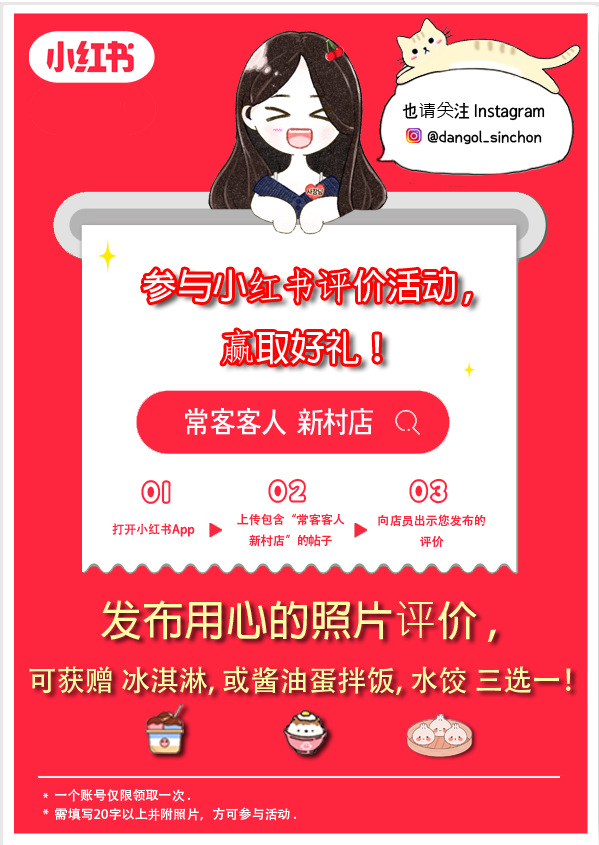
<style>
.page{position:relative;width:599px;height:845px;background:#fe253f}
.page>*{position:absolute;margin:0}
.t1{font:18px "Pix_SeoulNamsanCB";color:#000000}
.t2{font:18px "MicrosoftJhengHeiUIRegular";color:#000000}
.t3{font:16px "THEMiss";color:#000000}
.t4{font:30px "Pix_SeoulNamsanCB";color:#ffffff}
.t5{font:30px "KoreanPODGO-R";color:#fe253f}
.t6{font:12px "AdobeHeitiStd-Regular";color:#fe253f}
.t7{font:42px "AdobeFanHeitiStd-Bold";color:#fffea6}
.t8{font:42px "MicrosoftJhengHeiUIRegular";color:#fffea6}
.t9{font:29px "AdobeHeitiStd-Regular";color:#fffea6}
.t10{font:13px "AdobeHeitiStd-Regular";color:#ffffff}
.t11{font:13px "NanumBarunGothic";color:#ffffff}
</style>
<div class="page">
<p class="t1" style="left:402px;top:102px;width:143px;height:19px">也<span class="t2">请关</span>注 Instagram</p>
<p class="t3" style="left:427px;top:130px;width:115px;height:15px">@dangol_sinchon</p>
<p class="t4" style="left:185px;top:407px;width:188px;height:28px">常客客人 新村店</p>
<p class="t5" style="left:141px;top:480px;width:30px;height:24px">01</p>
<p class="t5" style="left:268px;top:478px;width:39px;height:25px">02</p>
<p class="t5" style="left:409px;top:478px;width:39px;height:26px">03</p>
<p class="t6" style="left:237px;top:513px;width:108px;height:34px;text-align:center">上传包含“常客客人 <br>新村店”的帖子</p>
<p class="t6" style="left:378px;top:514px;width:108px;height:33px;text-align:center">向店员出示您发布的<br>评价</p>
<p class="t6" style="left:112px;top:523px;width:83px;height:14px">打开小红书App</p>
<p class="t7" style="left:101px;top:600px;width:395px;height:42px">发布用心的照片<span class="t8">评</span>价 ,</p>
<p class="t9" style="left:29px;top:666px;width:542px;height:29px">可获赠 冰淇淋, 或酱油蛋拌饭, 水饺 三选一！</p>
<p class="t10" style="left:43px;top:789px;width:147px;height:13px"><span class="t11">*  </span>一个账号仅限领取一次 .</p>
<p class="t10" style="left:43px;top:807px;width:253px;height:14px">*  需填写20字以上并附照片，方可参与活动 .</p>
</div>
